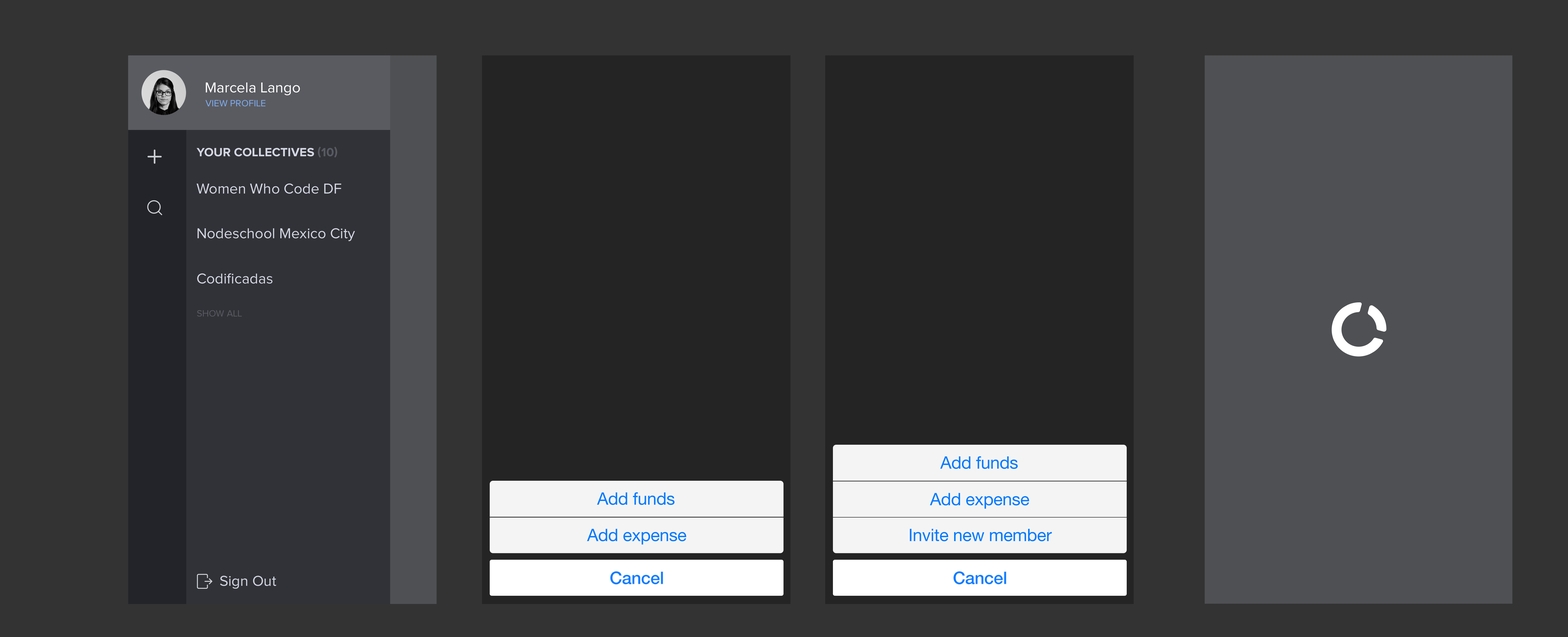
<style>
.page{position:relative;width:1568px;height:637px;background:#333333}
.page>*{position:absolute;margin:0}
.t1{font:14.9px "ProximaNova-Regular";color:#ffffff}
.t2{font:9.4px "ProximaNova-Regular";color:#7fadf2;text-transform:uppercase}
.t3{font:12.4px "ProximaNova-Bold";color:#d4d6e2;text-transform:uppercase}
.t4{font:12.4px "ProximaNova-Bold";color:#595b63;text-transform:uppercase}
.t5{font:14.9px "ProximaNova-Regular";color:#d4d6e2}
.t6{font:9.4px "ProximaNova-Regular";color:#595b63;text-transform:uppercase}
.t7{font:17.2px "HelveticaNeue";letter-spacing:-0.01em;color:#007aff}
.t8{font:14.9px "ProximaNova-Regular";color:#d0d2de}
.t9{font:17.2px "HelveticaNeue-Medium";letter-spacing:-0.01em;color:#007aff}
</style>
<div class="page">
<p class="t1" style="left:206px;top:82px;width:94px;height:13px">Marcela Lango</p>
<p class="t2" style="left:205px;top:100px;width:60px;height:7px">View profile</p>
<p class="t3" style="left:196px;top:147px;width:141px;height:11px">YOUR COLLECTIVES <span class="t4">(10)</span></p>
<p class="t5" style="left:196px;top:183px;width:145px;height:11px">Women Who Code DF</p>
<p class="t5" style="left:197px;top:228px;width:158px;height:13px">Nodeschool Mexico City</p>
<p class="t5" style="left:197px;top:273px;width:75px;height:11px">Codificadas</p>
<p class="t6" style="left:197px;top:310px;width:45px;height:7px">Show all</p>
<p class="t7" style="left:940px;top:456px;width:78px;height:13px">Add funds</p>
<p class="t7" style="left:597px;top:492px;width:77px;height:13px">Add funds</p>
<p class="t7" style="left:930px;top:493px;width:99px;height:16px">Add expense</p>
<p class="t7" style="left:587px;top:528px;width:99px;height:16px">Add expense</p>
<p class="t7" style="left:910px;top:528px;width:142px;height:13px">Invite new member</p>
<p class="t8" style="left:220px;top:575px;width:56px;height:14px">Sign Out</p>
<p class="t9" style="left:610px;top:571px;width:53px;height:13px">Cancel</p>
<p class="t9" style="left:953px;top:571px;width:54px;height:13px">Cancel</p>
</div>
